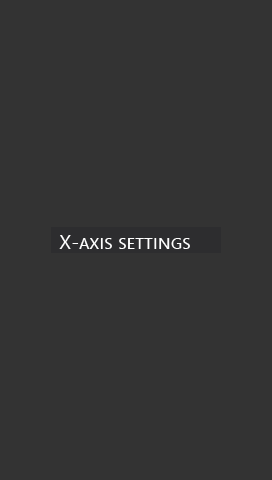
<style>
.page{position:relative;width:272px;height:480px;background:#333333}
.page>*{position:absolute;margin:0}
.t1{font:20px "SegoeUI";color:#ffffff;font-variant:small-caps}
</style>
<div class="page">
<p class="t1" style="left:59px;top:235px;width:131px;height:14px">X-axis settings</p>
</div>
